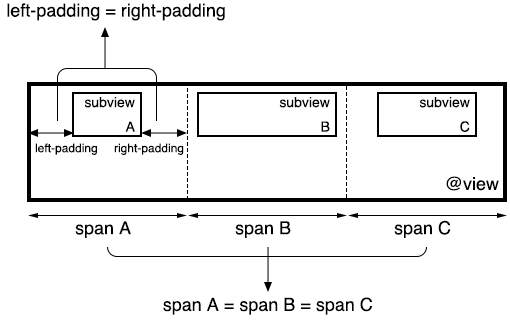
<style>
.page{position:relative;width:510px;height:320px;background:#ffffff}
.page>*{position:absolute;margin:0}
.t1{font:18px "Helvetica";color:#000000}
.t2{font:14px "Helvetica";color:#000000}
.t3{font:12px "Helvetica";color:#000000}
</style>
<div class="page">
<p class="t1" style="left:7px;top:3px;width:218px;height:18px">left-padding = right-padding</p>
<p class="t2" style="left:84px;top:97px;width:51px;height:35px;text-align:right">subview<br>A</p>
<p class="t2" style="left:279px;top:97px;width:51px;height:35px;text-align:right">subview<br>B</p>
<p class="t2" style="left:419px;top:97px;width:51px;height:35px;text-align:right">subview<br>C</p>
<p class="t3" style="left:35px;top:143px;width:62px;height:12px">left-padding</p>
<p class="t3" style="left:114px;top:143px;width:70px;height:12px">right-padding</p>
<p class="t1" style="left:446px;top:176px;width:53px;height:15px">@view</p>
<p class="t1" style="left:75px;top:221px;width:56px;height:17px">span A</p>
<p class="t1" style="left:235px;top:221px;width:56px;height:17px">span B</p>
<p class="t1" style="left:394px;top:220px;width:57px;height:18px">span C</p>
<p class="t1" style="left:163px;top:297px;width:209px;height:18px">span A = span B = span C</p>
</div>
